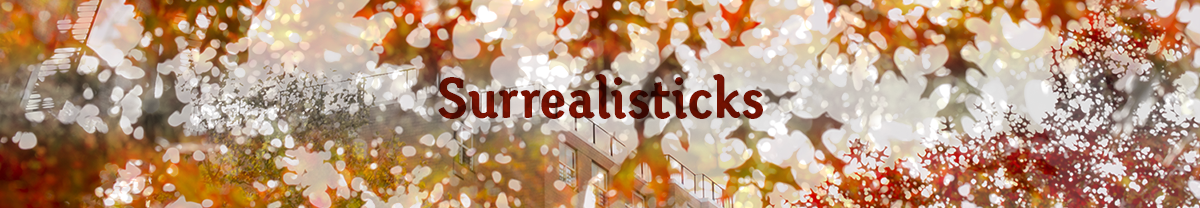
<style>
.page{position:relative;width:1200px;height:208px}
.page>*{position:absolute;margin:0}
.t1{font:60px "Otari-Bold-Limited";color:#6b1002}
</style>
<div class="page">
<p class="t1" style="left:438px;top:74px;width:325px;height:45px">Surrealisticks</p>
</div>
